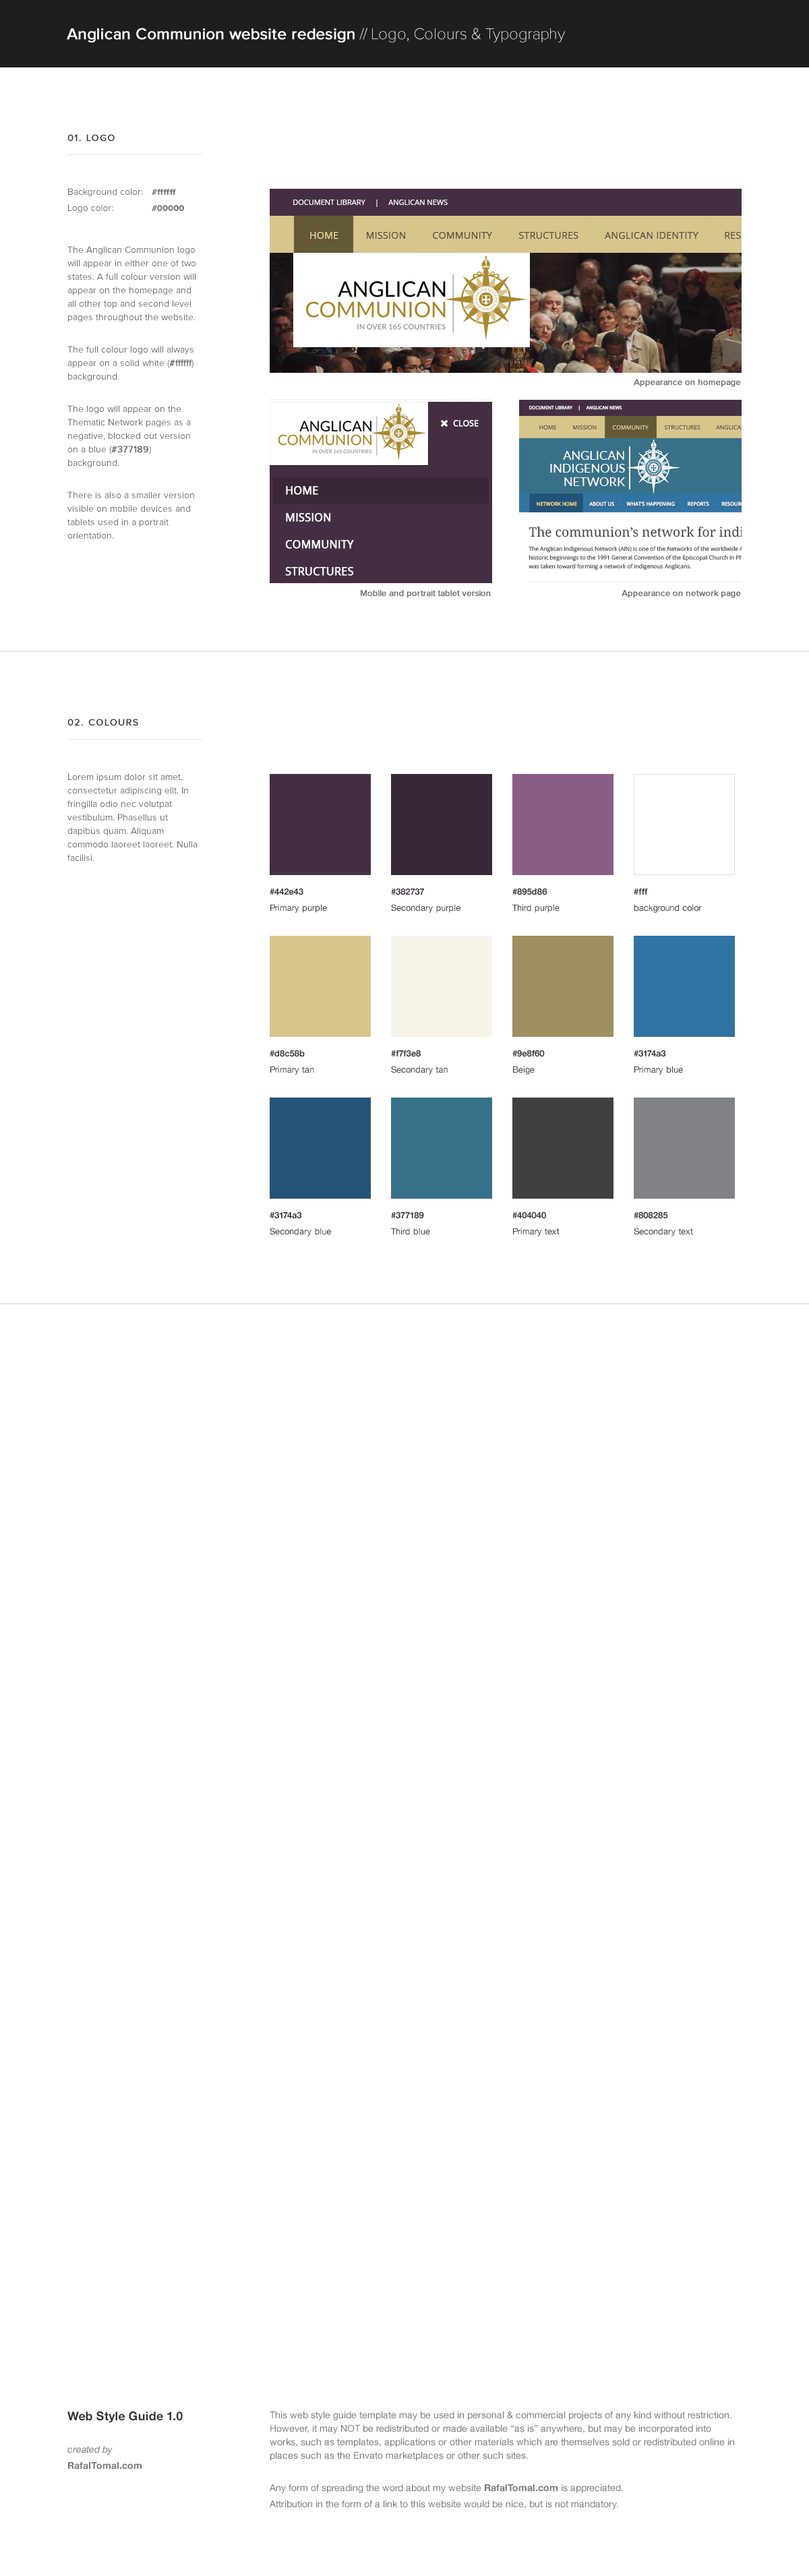
<style>
.page{position:relative;width:809px;height:2576px;background:#ffffff}
.page>*{position:absolute;margin:0}
.t1{font:16.2px "ProximaNova-Regular";color:#ffffff;font-weight:bold}
.t2{font:16.2px "ProximaNova-Thin";color:#ffffff}
.t3{font:9.4px "ProximaNova-Regular";letter-spacing:0.1em;color:#333333;text-transform:uppercase;font-weight:bold}
.t4{font:9.4px/13.5px "ProximaNova-Regular";color:#666666}
.t5{font:8.8px/13.5px "ProximaNova-Bold";color:#666666}
.t6{font:9.4px/13.5px "ProximaNova-Regular";color:#666666;font-weight:bold}
.t7{font:8.8px "ProximaNova-Regular";letter-spacing:-0.02em;color:#666666;font-weight:bold}
.t8{font:8.8px/13.5px "HelveticaNeue";color:#333333}
.t9{font:8.8px/13.5px "HelveticaNeue-Bold";color:#333333}
.t10{font:8.8px/13.5px "HelveticaNeue-Bold";color:#442e43}
.t11{font:12.1px/13.5px "HelveticaNeue-Bold";color:#333333}
.t12{font:9.4px/13.5px "HelveticaNeue-Italic";color:#777777}
.t13{font:9.4px/13.5px "HelveticaNeue-Bold";color:#777777}
.t14{font:9.4px/13.5px "HelveticaNeue";color:#777777}
</style>
<div class="page">
<p class="t1" style="left:67px;top:28px;width:498px;height:14px">Anglican Communion website redesign <span class="t2">// Logo, Colours &amp; Typography</span></p>
<p class="t3" style="left:67px;top:134px;width:48px;height:8px">01. logo</p>
<p class="t4" style="left:68px;top:188px;width:75px;height:25px">Background color:<br>Logo color:</p>
<p class="t5" style="left:152px;top:189px;width:32px;height:22px">#ffffff<br>#00000</p>
<p class="t4" style="left:67px;top:246px;width:129px;height:293px">The Anglican Communion logo will appear in either one of two states. A full colour version will appear on the homepage and all other top and second level pages throughout the website.<br><br>The full colour logo will always appear on a solid white (<span class="t6">#ffffff</span>) background. <br><br>The logo will appear on the Thematic Network pages as a negative, blocked out version on a blue (<span class="t6">#377189</span>) background.<br><br>There is also a smaller version visible on mobile devices and tablets used in a portrait orientation.</p>
<p class="t7" style="left:634px;top:379px;width:107px;height:8px">Appearance on homepage</p>
<p class="t7" style="left:361px;top:590px;width:130px;height:8px">Mobile and portrait tablet version</p>
<p class="t7" style="left:622px;top:590px;width:119px;height:8px">Appearance on network page</p>
<p class="t3" style="left:67px;top:719px;width:71px;height:7px">02. coloUrs</p>
<p class="t4" style="left:67px;top:773px;width:131px;height:88px">Lorem ipsum dolor sit amet, consectetur adipiscing elit. In fringilla odio nec volutpat vestibulum. Phasellus ut dapibus quam. Aliquam commodo laoreet laoreet. Nulla facilisi.</p>
<p class="t8" style="left:270px;top:888px;width:57px;height:25px"><span class="t9">#442e43<br></span>Primary purple</p>
<p class="t8" style="left:391px;top:888px;width:69px;height:25px"><span class="t9">#</span><span class="t10">382737<br></span>Secondary purple</p>
<p class="t8" style="left:512px;top:888px;width:48px;height:25px"><span class="t9">#895d86<br></span>Third purple</p>
<p class="t8" style="left:634px;top:888px;width:68px;height:25px"><span class="t9">#fff<br></span>background color</p>
<p class="t8" style="left:270px;top:1050px;width:44px;height:25px"><span class="t9">#d8c58b<br></span>Primary tan</p>
<p class="t8" style="left:391px;top:1050px;width:57px;height:25px"><span class="t9">#f7f3e8<br></span>Secondary tan</p>
<p class="t9" style="left:512px;top:1050px;width:33px;height:25px">#9e8f60<br><span class="t8">Beige</span></p>
<p class="t8" style="left:634px;top:1050px;width:49px;height:25px"><span class="t9">#3174a3<br></span>Primary blue</p>
<p class="t8" style="left:270px;top:1211px;width:61px;height:25px"><span class="t9">#3174a3<br></span>Secondary blue</p>
<p class="t8" style="left:391px;top:1211px;width:39px;height:24px"><span class="t9">#377189<br></span>Third blue</p>
<p class="t8" style="left:512px;top:1211px;width:48px;height:25px"><span class="t9">#404040<br></span>Primary text</p>
<p class="t8" style="left:634px;top:1211px;width:59px;height:25px"><span class="t9">#808285<br></span>Secondary text</p>
<p class="t11" style="left:67px;top:2411px;width:116px;height:58px">Web Style Guide 1.0 <br><span class="t12"><br>created by</span><span class="t13"><br>RafalTomal.com</span></p>
<p class="t14" style="left:270px;top:2412px;width:464px;height:97px">This web style guide template may be used in personal &amp; commercial projects of any kind without restriction. However, it may NOT be redistributed or made available “as is” anywhere, but may be incorporated into works, such as templates, applications or other materials which are themselves sold or redistributed online in places such as the Envato marketplaces or other such sites.<br><br>Any form of spreading the word about my website <span class="t13">RafalTomal.com</span> is appreciated.<br>Attribution in the form of a link to this website would be nice, but is not mandatory.</p>
</div>
